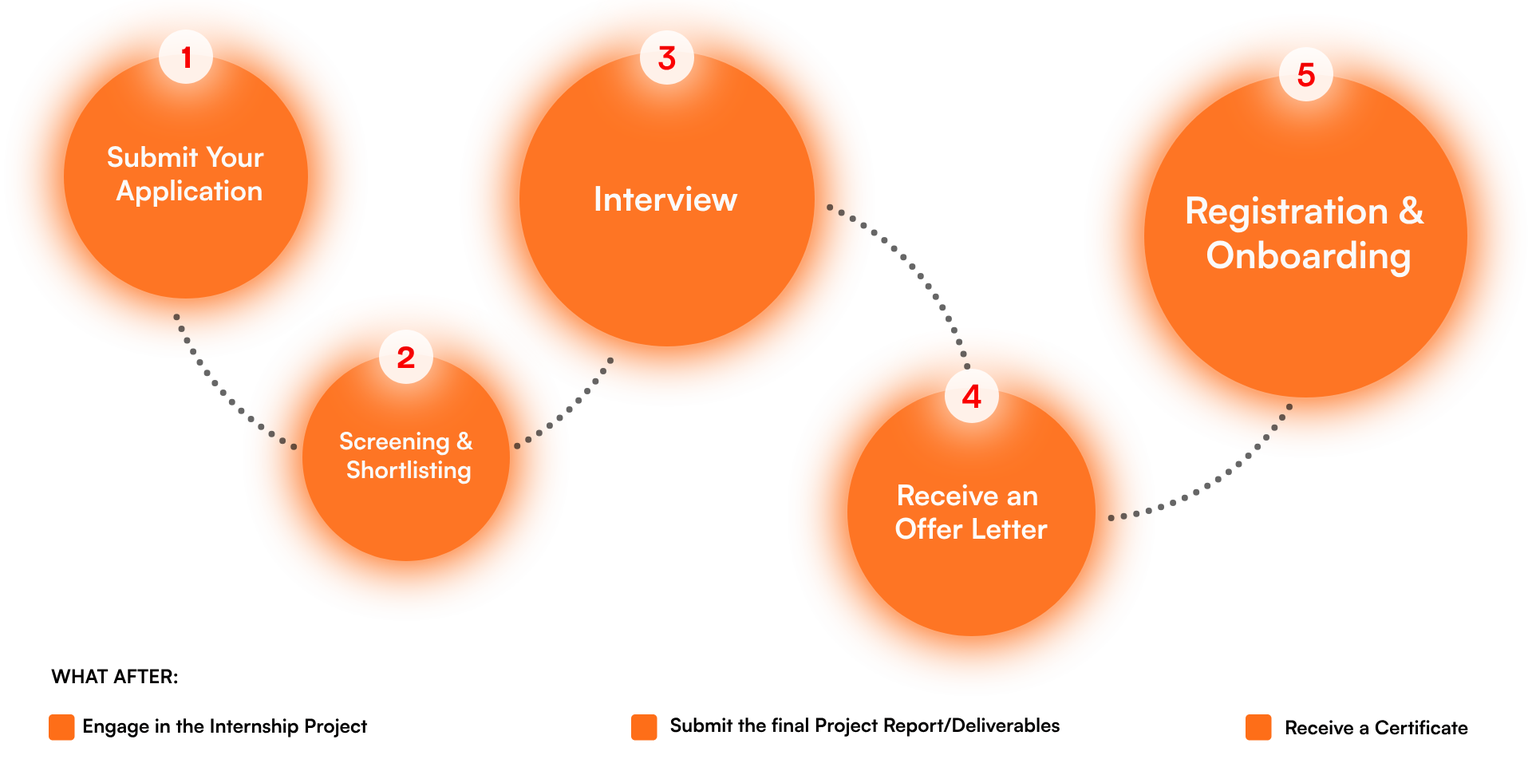
<style>
.page{position:relative;width:1532px;height:779px;background:#ffffff}
.page>*{position:absolute;margin:0}
.t1{font:31.9px "BricolageGrotesque24pt-Bold";color:#fb0000}
.t2{font:31.9px "Satoshi-Bold";color:#fb0000}
.t3{font:31.9px "Satoshi-Bold";color:#f30000}
.t4{font:27.9px "Satoshi-Bold";color:#fafafa}
.t5{font:33.7px "Satoshi-Bold";color:#fafafa}
.t6{font:36.9px "Satoshi-Bold";color:#fafafa}
.t7{font:23.7px "Satoshi-Bold";color:#fafafa}
.t8{font:28.4px "Satoshi-Bold";color:#fafafa}
.t9{font:19.1px "Satoshi-Bold";color:#010000}
</style>
<div class="page">
<p class="t1" style="left:182px;top:46px;width:8px;height:22px">1</p>
<p class="t2" style="left:658px;top:45px;width:18px;height:25px">3</p>
<p class="t3" style="left:1297px;top:62px;width:18px;height:25px">5</p>
<p class="t4" style="left:108px;top:146px;width:156px;height:61px;text-align:center">Submit Your <br>Application</p>
<p class="t5" style="left:595px;top:185px;width:143px;height:26px">Interview</p>
<p class="t6" style="left:1186px;top:195px;width:239px;height:83px;text-align:center">Registration &amp; <br>Onboarding</p>
<p class="t1" style="left:397px;top:345px;width:18px;height:23px">2</p>
<p class="t2" style="left:962px;top:384px;width:19px;height:24px">4</p>
<p class="t7" style="left:340px;top:432px;width:133px;height:52px;text-align:center">Screening &amp; <br>Shortlisting</p>
<p class="t8" style="left:895px;top:483px;width:152px;height:56px;text-align:center">Receive an <br>Offer Letter</p>
<p class="t9" style="left:51px;top:668px;width:127px;height:16px">WHAT AFTER:</p>
<p class="t9" style="left:83px;top:718px;width:285px;height:19px">Engage in the Internship Project</p>
<p class="t9" style="left:670px;top:717px;width:389px;height:19px">Submit the final Project Report/Deliverables</p>
<p class="t9" style="left:1285px;top:720px;width:183px;height:15px">Receive a Certificate</p>
</div>
